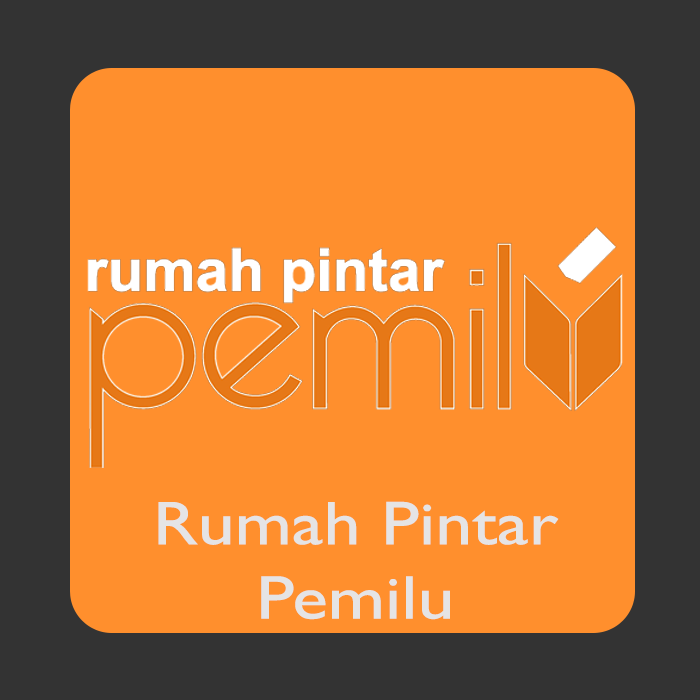
<style>
.page{position:relative;width:700px;height:700px;background:#ff8f2d}
.page>*{position:absolute;margin:0}
.t1{font:62px "GillSansMT";color:#e5e4e5;scale:1.2 1}
</style>
<div class="page">
<p class="t1" style="left:158px;top:501px;width:401px;height:119px;text-align:center">Rumah Pintar<br>Pemilu</p>
</div>
